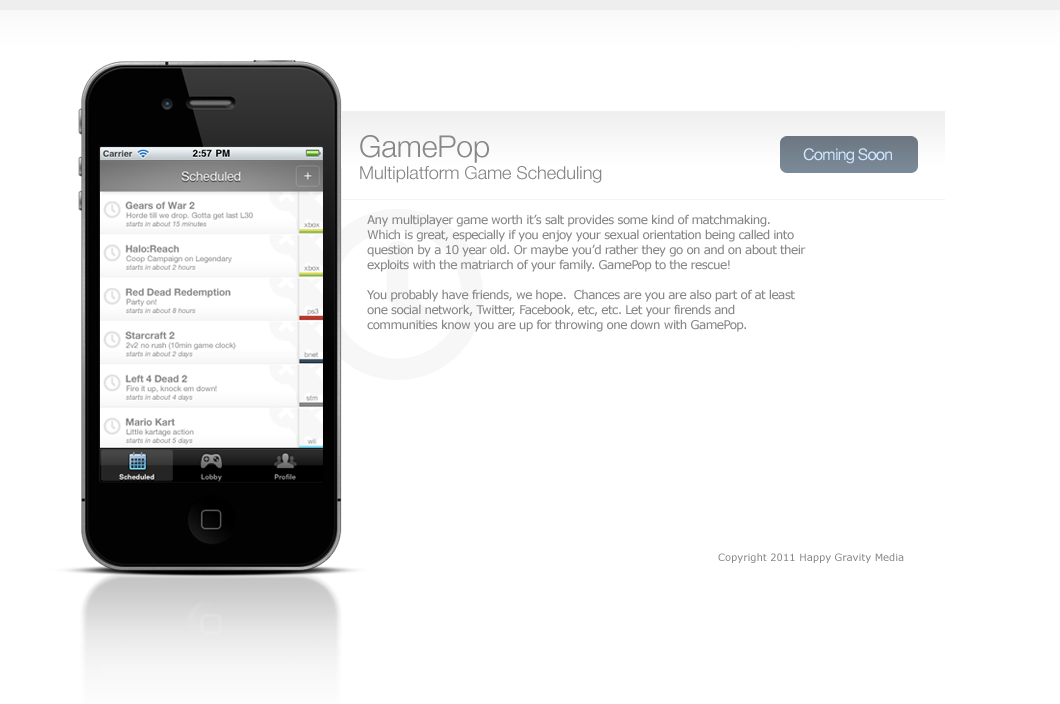
<style>
.page{position:relative;width:1060px;height:704px;background:#ffffff}
.page>*{position:absolute;margin:0}
.t1{font:30px "HelveticaNeue-Light";color:#888888}
.t2{font:16px "HelveticaNeue";letter-spacing:-0.05em;color:#cde6ff}
.t3{font:18px "HelveticaNeue-Light";color:#888888}
.t4{font:12px/15px "Verdana";letter-spacing:-0.05em;color:#888888}
.t5{font:10px "Verdana";color:#888888}
</style>
<div class="page">
<p class="t1" style="left:360px;top:135px;width:129px;height:28px">GamePop</p>
<p class="t2" style="left:803px;top:148px;width:89px;height:16px">Coming Soon</p>
<p class="t3" style="left:360px;top:166px;width:242px;height:17px">Multiplatform Game Scheduling</p>
<p class="t4" style="left:367px;top:214px;width:439px;height:118px">Any multiplayer game worth it’s salt provides some kind of matchmaking. Which is great, especially if you enjoy your sexual orientation being called into question by a 10 year old. Or maybe you’d rather they go on and on about their exploits with the matriarch of your family. GamePop to the rescue!<br><br>You probably have friends, we hope.  Chances are you are also part of at least one social network, Twitter, Facebook, etc, etc. Let your firends and <br>communities know you are up for throwing one down with GamePop.</p>
<p class="t5" style="left:718px;top:553px;width:186px;height:10px">Copyright 2011 Happy Gravity Media</p>
</div>
